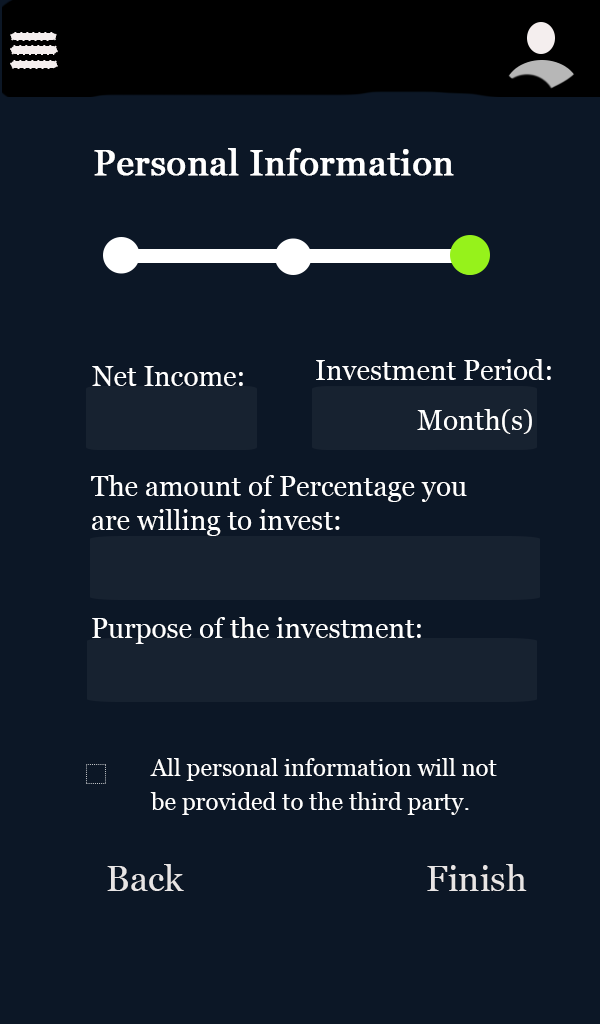
<style>
.page{position:relative;width:600px;height:1024px;background:#0c1726}
.page>*{position:absolute;margin:0}
.t1{font:36px "Georgia";color:#ffffff;font-weight:bold}
.t2{font:28px "Georgia";color:#ffffff}
.t3{font:28px "Georgia";color:#ffffff;text-transform:uppercase}
.t4{font:24px "Georgia";color:#ffffff}
.t5{font:36px "Georgia";color:#e8e5e5}
</style>
<div class="page">
<p class="t1" style="left:94px;top:148px;width:360px;height:28px">Personal Information</p>
<p class="t2" style="left:92px;top:366px;width:151px;height:20px"><span class="t3">N</span>et Income<span class="t3">:</span></p>
<p class="t2" style="left:316px;top:359px;width:235px;height:21px">Investment Period:</p>
<p class="t2" style="left:417px;top:409px;width:115px;height:25px">Month(s)</p>
<p class="t2" style="left:91px;top:475px;width:376px;height:61px">The amount of Percentage you  <br>are willing to invest:</p>
<p class="t2" style="left:92px;top:617px;width:329px;height:27px">Purpose of the investment:</p>
<p class="t4" style="left:150px;top:758px;width:347px;height:57px">All personal information will not<br>be provided to the third party.</p>
<p class="t5" style="left:107px;top:864px;width:77px;height:27px">Back</p>
<p class="t5" style="left:427px;top:864px;width:100px;height:27px">Finish</p>
</div>
